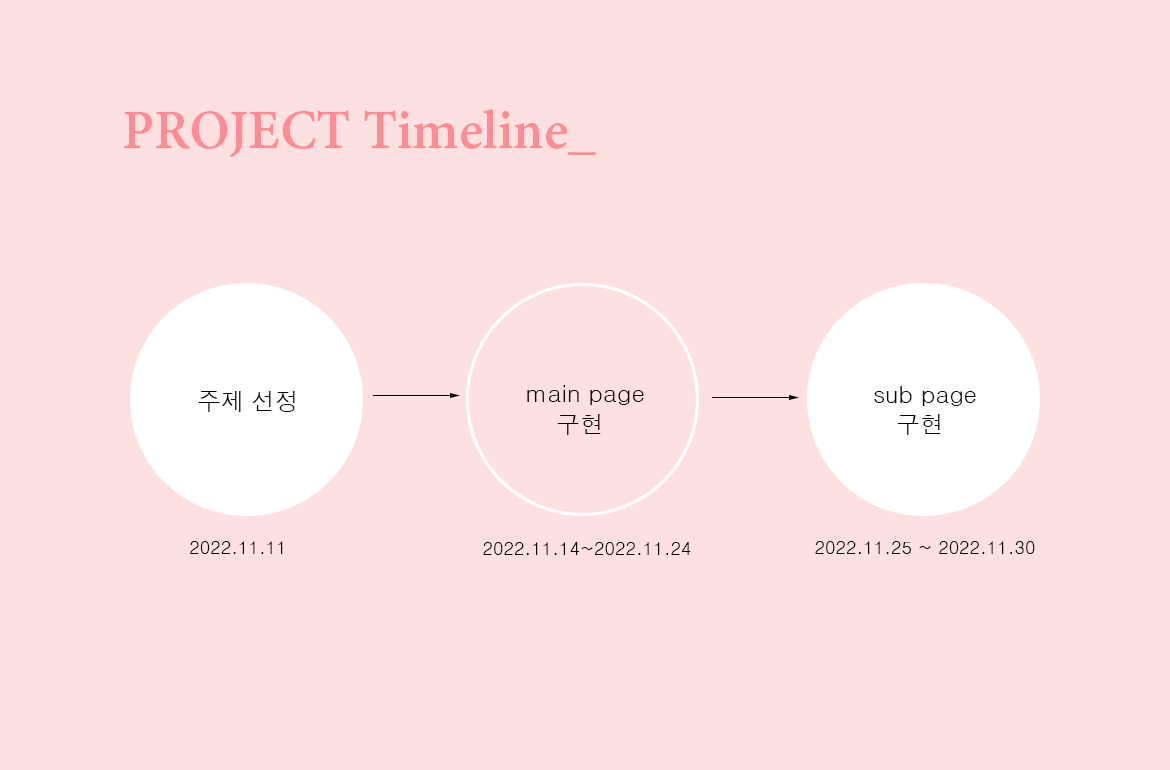
<style>
.page{position:relative;width:1170px;height:770px;background:#fde1e1}
.page>*{position:absolute;margin:0}
.t1{font:60px "AdobeDevanagari-Bold";color:#ff8b94}
.t2{font:24px "Dotum";color:#0d0203}
.t3{font:18px "Dotum";color:#0c0606}
</style>
<div class="page">
<p class="t1" style="left:124px;top:109px;width:472px;height:48px">PROJECT Timeline_</p>
<p class="t2" style="left:527px;top:385px;width:117px;height:20px">main page</p>
<p class="t2" style="left:874px;top:386px;width:102px;height:20px">sub page</p>
<p class="t2" style="left:198px;top:391px;width:97px;height:21px">주제 선정</p>
<p class="t2" style="left:557px;top:414px;width:44px;height:21px">구현</p>
<p class="t2" style="left:897px;top:414px;width:44px;height:21px">구현</p>
<p class="t3" style="left:190px;top:541px;width:93px;height:13px">2022.11.11</p>
<p class="t3" style="left:483px;top:542px;width:208px;height:13px">2022.11.14~2022.11.24</p>
<p class="t3" style="left:815px;top:541px;width:220px;height:13px">2022.11.25 ~ 2022.11.30</p>
</div>
